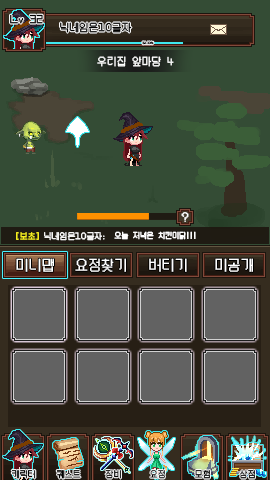
<style>
.page{position:relative;width:270px;height:480px;background:#344c35}
.page>*{position:absolute;margin:0}
.t1{font:11.1px "PFStardust";color:#000000;font-weight:bold}
.t2{font:3px "PFStardust";color:#000000;font-weight:bold}
.t3{font:11.1px "PFStardust";color:#ffffff;font-weight:bold}
.t4{font:11.9px "PFStardust";color:#ffffff;font-weight:bold}
.t5{font:9px "PFStardust";color:#fff720;font-weight:bold}
.t6{font:9px "PFStardust";color:#ffffff;font-weight:bold}
.t7{font:8px "PFStardust";color:#ffffff;font-weight:bold}
.t8{font:15px "PFStardust";color:#ffffff;font-weight:bold}
.t9{font:9.1px "PFStardust";color:#000000;font-weight:bold}
.t10{font:9.1px "PFStardust";font-weight:bold}
</style>
<div class="page">
<p class="t1" style="left:10px;top:14px;width:33px;height:10px">Lv 32</p>
<p class="t1" style="left:60px;top:22px;width:72px;height:11px">닉네임은10글자</p>
<p class="t2" style="left:142px;top:41px;width:12px;height:4px">80.00%</p>
<p class="t3" style="left:97px;top:56px;width:77px;height:11px">우리집 앞마당 4</p>
<p class="t4" style="left:181px;top:212px;width:8px;height:10px">?</p>
<p class="t5" style="left:16px;top:232px;width:23px;height:8px">[보초]</p>
<p class="t6" style="left:44px;top:232px;width:61px;height:9px">닉네임은10글자:</p>
<p class="t7" style="left:114px;top:231px;width:82px;height:9px">오늘 저녁은 치킨이닭!!!</p>
<p class="t8" style="left:16px;top:258px;width:38px;height:14px">미니맵</p>
<p class="t8" style="left:75px;top:258px;width:51px;height:14px">요정찾기</p>
<p class="t8" style="left:149px;top:258px;width:38px;height:14px">버티기</p>
<p class="t8" style="left:215px;top:258px;width:38px;height:14px">미공개</p>
<p class="t9" style="left:11px;top:470px;width:25px;height:9px">캐릭터</p>
<p class="t9" style="left:56px;top:470px;width:25px;height:9px">퀘스트</p>
<p class="t9" style="left:105px;top:470px;width:16px;height:9px">장비</p>
<p class="t9" style="left:150px;top:470px;width:15px;height:9px">요정</p>
<p class="t9" style="left:195px;top:470px;width:15px;height:9px">모험</p>
<p class="t10" style="left:239px;top:470px;width:16px;height:9px">상점</p>
</div>
